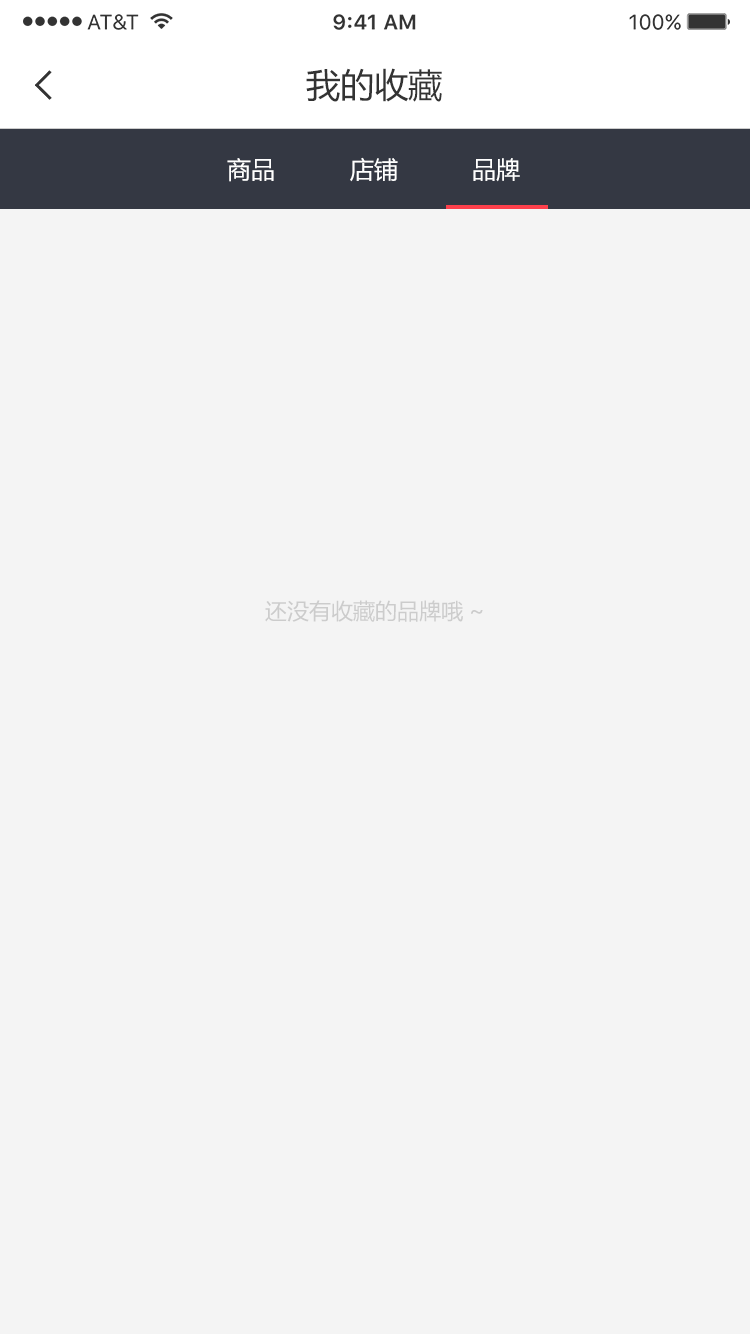
<style>
.page{position:relative;width:750px;height:1334px;background:#f4f4f4}
.page>*{position:absolute;margin:0}
.t1{font:34px "MicrosoftYaHei";color:#333333}
.t2{font:24px "MicrosoftYaHei";color:#ffffff}
.t3{font:22px "MicrosoftYaHei";color:#cccccc}
</style>
<div class="page">
<p class="t1" style="left:306px;top:68px;width:136px;height:34px">我的收藏</p>
<p class="t2" style="left:227px;top:158px;width:47px;height:24px">商品</p>
<p class="t2" style="left:350px;top:157px;width:48px;height:25px">店铺</p>
<p class="t2" style="left:473px;top:158px;width:47px;height:24px">品牌</p>
<p class="t3" style="left:265px;top:600px;width:218px;height:22px">还没有收藏的品牌哦~</p>
</div>
